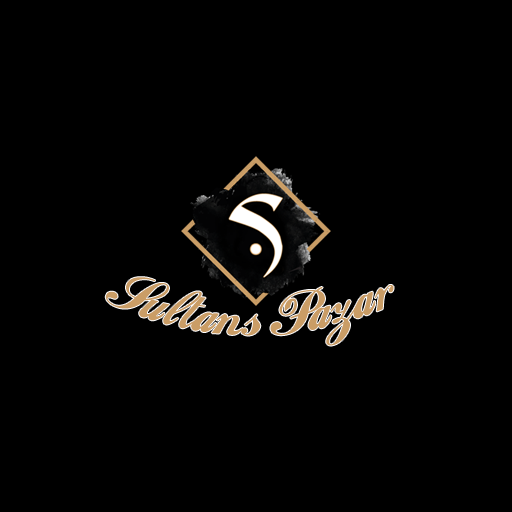
<style>
.page{position:relative;width:512px;height:512px;background:#000000}
.page>*{position:absolute;margin:0}
.t1{font:60px "CocaColaii";color:#ca9e66}
</style>
<div class="page">
<p class="t1" style="left:105px;top:277px;width:289px;height:69px">Sultans Pazar</p>
</div>
